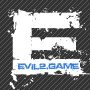
<style>
.page{position:relative;width:90px;height:90px;background:#333333}
.page>*{position:absolute;margin:0}
.t1{font:90px "Defused-ExtendedBold";color:#ffffff}
.t2{font:8px "Defused-ExtendedBold";color:#327cd5}
</style>
<div class="page">
<p class="t1" style="left:7px;top:7px;width:84px;height:84px">E</p>
<p class="t2" style="left:17px;top:62px;width:63px;height:9px">Evil2.Game</p>
</div>
